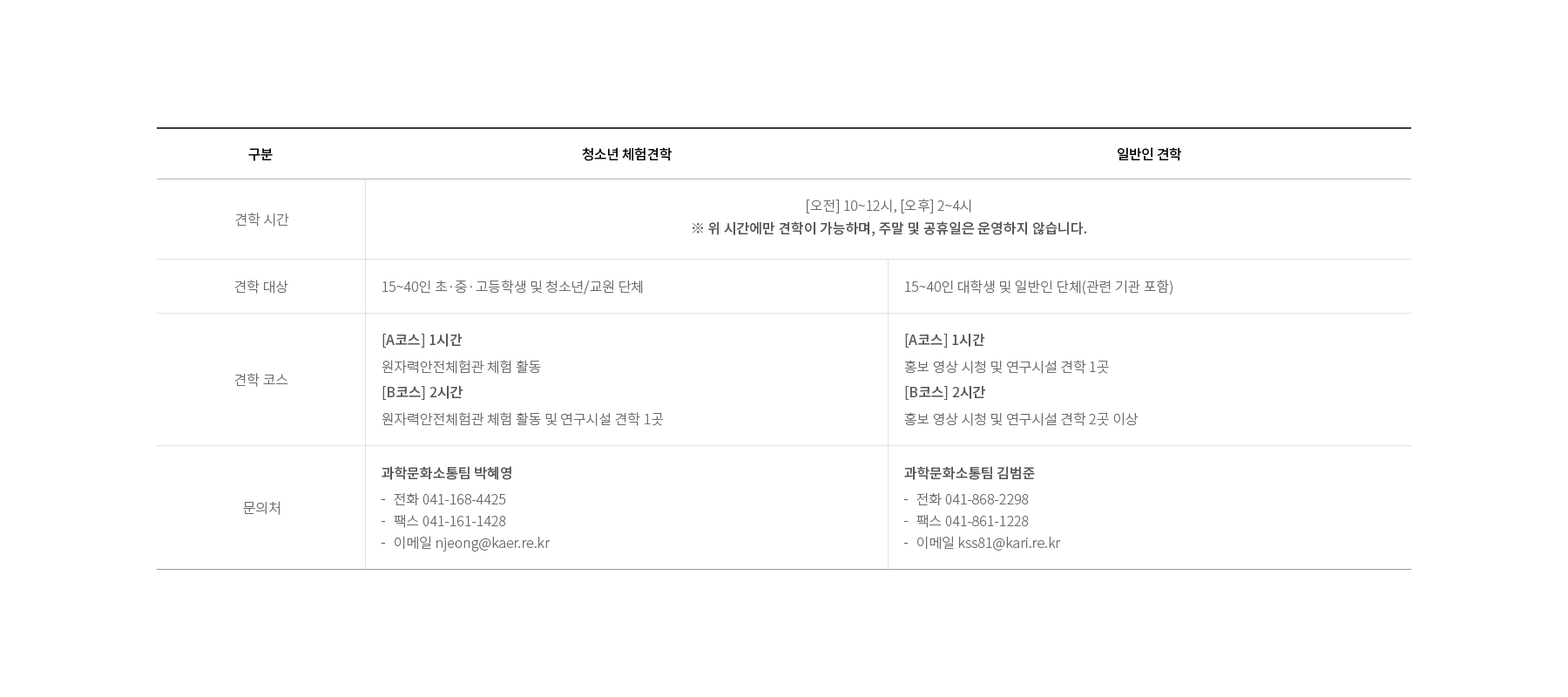
<style>
.page{position:relative;width:1568px;height:697px;background:#ffffff}
.page>*{position:absolute;margin:0}
.t1{font:13.9px "NotoSansKR-Medium";letter-spacing:-0.025em;color:#010101}
.t2{font:13.9px/22.6px "NotoSansKR-Medium";color:#555555}
.t3{font:13.9px/22.6px "NotoSansKR-Light";color:#6a6a6a}
.t4{font:13.9px "NotoSansKR-Light";color:#6a6a6a}
.t5{font:13.9px/27px "NotoSansKR-Light";color:#6a6a6a}
.t6{font:13.9px/25.3px "NotoSansKR-Medium";color:#555555}
.t7{font:13.9px/21.8px "NotoSansKR-Light";color:#6a6a6a}
.t8{font:13.9px/26.1px "NotoSansKR-Light";color:#6a6a6a}
</style>
<div class="page">
<p class="t1" style="left:248px;top:148px;width:25px;height:13px">구분</p>
<p class="t1" style="left:582px;top:147px;width:90px;height:14px">청소년 체험견학</p>
<p class="t1" style="left:1118px;top:147px;width:63px;height:14px">일반인 견학</p>
<p class="t2" style="left:693px;top:199px;width:393px;height:38px;text-align:center"><span class="t3">[오전] 10~12시, [오후] 2~4시<br></span>※ 위 시간에만 견학이 가능하며, 주말 및 공휴일은 운영하지 않습니다.</p>
<p class="t4" style="left:235px;top:213px;width:54px;height:13px">견학 시간</p>
<p class="t4" style="left:234px;top:280px;width:54px;height:14px">견학 대상</p>
<p class="t4" style="left:382px;top:280px;width:261px;height:14px">15~40인 초·중·고등학생 및 청소년/교원 단체</p>
<p class="t4" style="left:905px;top:280px;width:268px;height:15px">15~40인 대학생 및 일반인 단체(관련 기관 포함)</p>
<p class="t5" style="left:382px;top:333px;width:281px;height:93px"><span class="t2">[A코스] 1시간<br></span>원자력안전체험관 체험 활동<br><span class="t6">[B코스] 2시간<br></span>원자력안전체험관 체험 활동 및 연구시설 견학 1곳</p>
<p class="t5" style="left:904px;top:333px;width:235px;height:93px"><span class="t2">[A코스] 1시간<br></span>홍보 영상 시청 및 연구시설 견학 1곳<br><span class="t6">[B코스] 2시간<br></span>홍보 영상 시청 및 연구시설 견학 2곳 이상</p>
<p class="t4" style="left:234px;top:373px;width:54px;height:14px">견학 코스</p>
<p class="t7" style="left:382px;top:466px;width:169px;height:85px"><span class="t2">과학문화소통팀 박혜영<br></span><span class="t8">    전화 041-168-4425<br></span>    팩스 041-161-1428<br>    이메일 njeong@kaer.re.kr</p>
<p class="t7" style="left:904px;top:466px;width:157px;height:85px"><span class="t2">과학문화소통팀 김범준<br></span><span class="t8">    전화 041-868-2298<br></span>    팩스 041-861-1228<br>    이메일 kss81@kari.re.kr</p>
<p class="t4" style="left:243px;top:501px;width:37px;height:14px">문의처</p>
</div>
